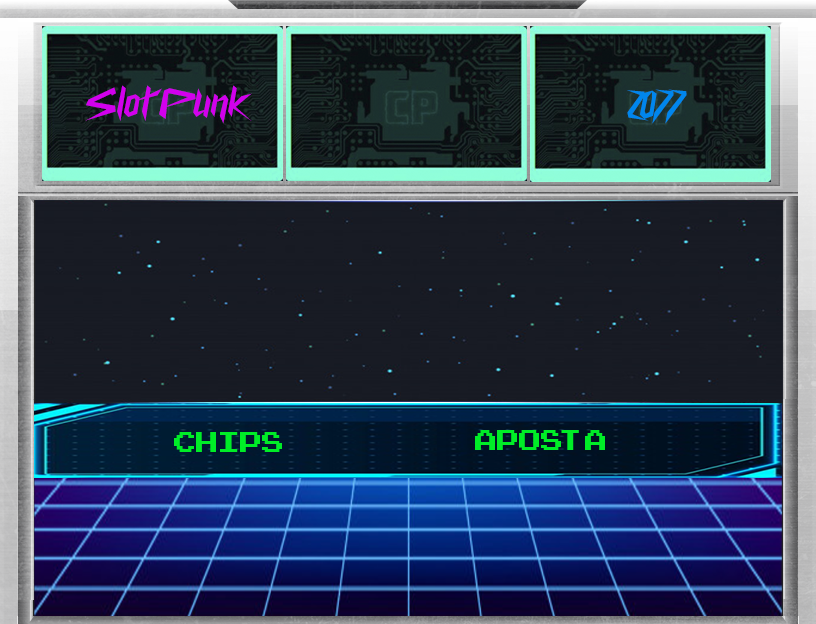
<style>
.page{position:relative;width:816px;height:624px}
.page>*{position:absolute;margin:0}
.t1{font:40px "CyberwayRiders";color:#d200ed}
.t2{font:40px "CyberwayRiders";color:#0086ed}
.t3{font:40px "ArcadeClassic";color:#00ed27}
</style>
<div class="page">
<p class="t1" style="left:85px;top:85px;width:167px;height:39px">Slot Punk</p>
<p class="t2" style="left:627px;top:89px;width:60px;height:35px">2077</p>
<p class="t3" style="left:174px;top:432px;width:108px;height:20px">Chips</p>
<p class="t3" style="left:475px;top:430px;width:130px;height:20px">Aposta</p>
</div>
